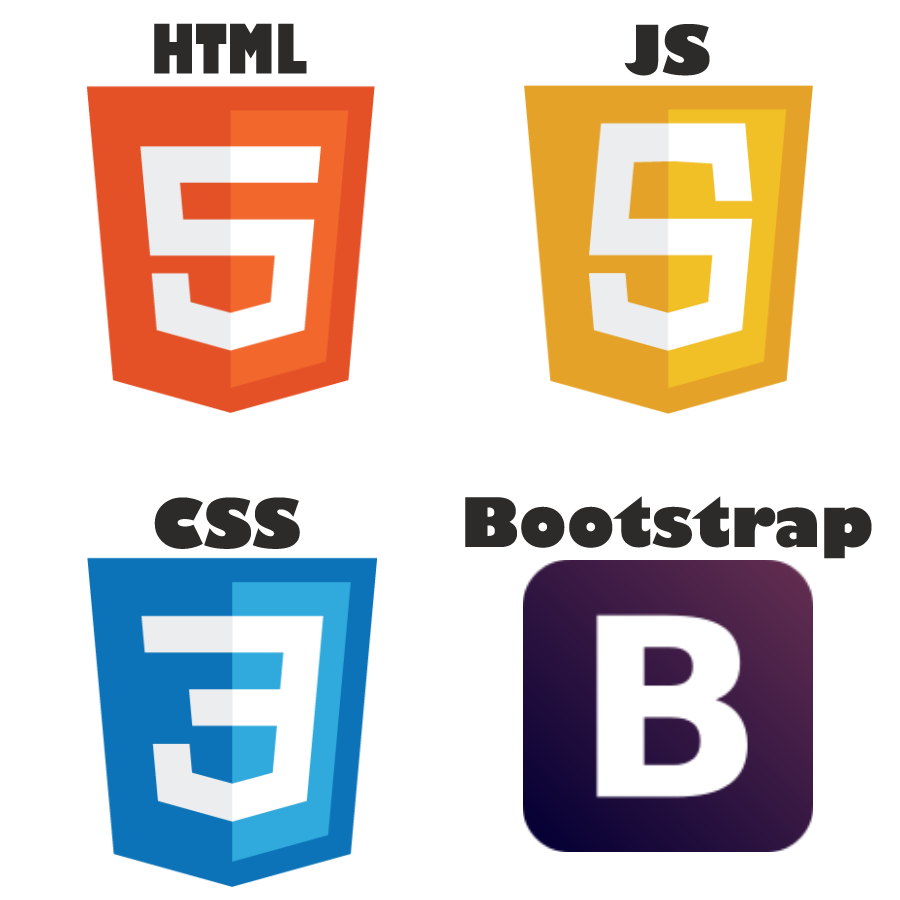
<style>
.page{position:relative;width:900px;height:900px;background:#ffffff}
.page>*{position:absolute;margin:0}
.t1{font:66.7px "GillSans-UltraBoldCondensed";color:#2c2b2a}
.t2{font:66.7px "GillSans-UltraBold";color:#2c2b2a}
</style>
<div class="page">
<p class="t1" style="left:154px;top:23px;width:153px;height:51px">HTML</p>
<p class="t2" style="left:624px;top:24px;width:86px;height:52px">JS</p>
<p class="t2" style="left:154px;top:497px;width:146px;height:52px">CSS</p>
<p class="t2" style="left:465px;top:496px;width:407px;height:63px">Bootstrap</p>
</div>
